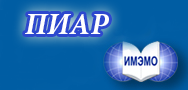
<style>
.page{position:relative;width:188px;height:90px;background:#005da3}
.page>*{position:absolute;margin:0}
.t1{font:30px "MinionPro-BoldIt";color:#ffffff}
</style>
<div class="page">
<p class="t1" style="left:25px;top:14px;width:84px;height:20px">ПИАР</p>
</div>
